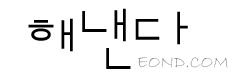
<style>
.page{position:relative;width:242px;height:82px;background:#ffffff}
.page>*{position:absolute;margin:0}
.t1{font:36px "ArialUnicodeMS";color:#000000}
.t2{font:18px "BradleyHandITC";color:#8f8f8f}
</style>
<div class="page">
<p class="t1" style="left:82px;top:11px;width:25px;height:21px">ㄴ</p>
<p class="t1" style="left:114px;top:8px;width:12px;height:34px">ㅐ</p>
<p class="t1" style="left:177px;top:11px;width:11px;height:34px">ㅏ</p>
<p class="t1" style="left:28px;top:20px;width:26px;height:21px">ㅎ</p>
<p class="t1" style="left:61px;top:18px;width:12px;height:34px">ㅐ</p>
<p class="t1" style="left:135px;top:19px;width:25px;height:21px">ㄷ</p>
<p class="t1" style="left:106px;top:48px;width:25px;height:21px">ㄴ</p>
<p class="t2" style="left:138px;top:57px;width:90px;height:11px">EOND.COM</p>
</div>
